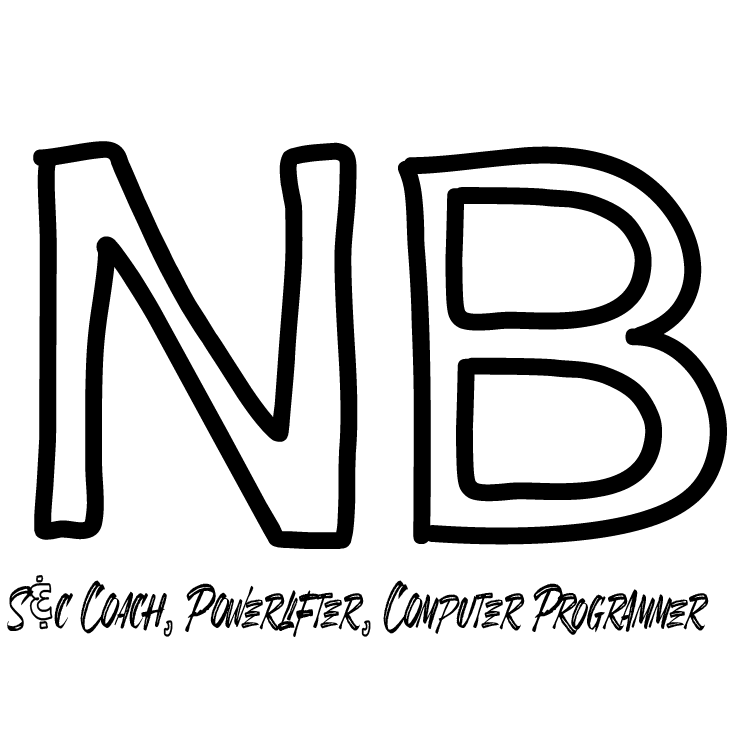
<style>
.page{position:relative;width:745px;height:745px;background:#ffffff}
.page>*{position:absolute;margin:0}
.t1{font:553.7px "SloppyHollow";color:#000000}
.t2{font:67.4px "SheTerrorDemo-Regular";color:#000000;scale:0.71 1}
.t3{font:67.4px "SloppyHollow";color:#000000;scale:0.71 1}
</style>
<div class="page">
<p class="t1" style="left:33px;top:141px;width:694px;height:408px">NB</p>
<p class="t2" style="left:7px;top:575px;width:702px;height:62px">S<span class="t3">&amp;</span>c Coach<span class="t3">,</span> Powerlifter<span class="t3">,</span> Computer Programmer</p>
</div>
